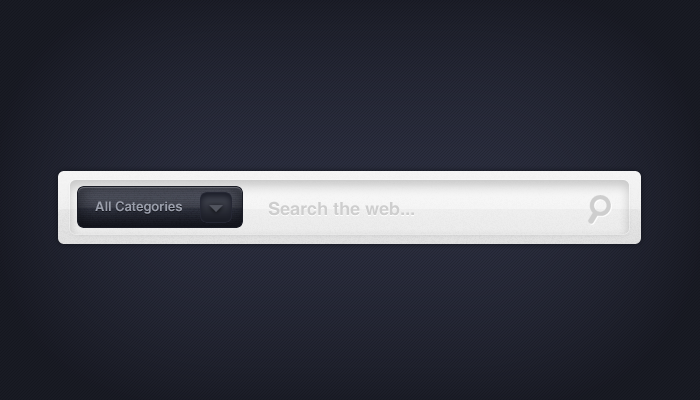
<style>
.page{position:relative;width:700px;height:400px}
.page>*{position:absolute;margin:0}
.t1{font:13px "Helvetica-Bold";color:#9a9eab}
.t2{font:18px "Helvetica-Bold";color:#cecece}
</style>
<div class="page">
<p class="t1" style="left:95px;top:201px;width:87px;height:13px">All Categories</p>
<p class="t2" style="left:268px;top:201px;width:146px;height:15px">Search the web...</p>
</div>
